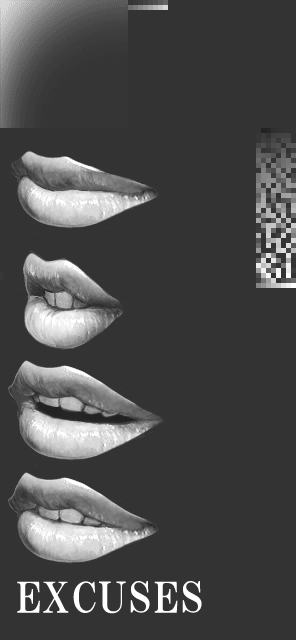
<style>
.page{position:relative;width:296px;height:640px;background:#333333}
.page>*{position:absolute;margin:0}
.t1{font:41.8px "HGPMinchoE";letter-spacing:0.05em;color:#ffffff;text-transform:uppercase}
</style>
<div class="page">
<p class="t1" style="left:17px;top:581px;width:185px;height:33px">excuses</p>
</div>
